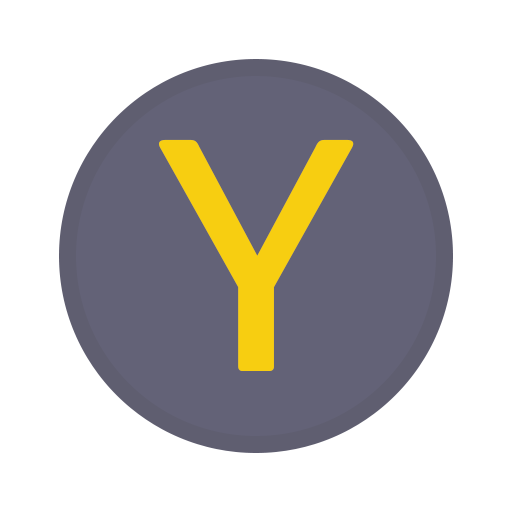
<style>
.page{position:relative;width:512px;height:512px;background:#ffffff}
.page>*{position:absolute;margin:0}
.t1{font:339.8px "Alpino-Medium";color:#f7ce11}
</style>
<div class="page">
<p class="t1" style="left:159px;top:139px;width:195px;height:232px">Y</p>
</div>
